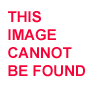
<style>
.page{position:relative;width:100px;height:95px;background:#ffffff}
.page>*{position:absolute;margin:0}
.t1{font:15px "Arial-BoldMT";color:#f50437;text-transform:uppercase}
</style>
<div class="page">
<p class="t1" style="left:8px;top:11px;width:77px;height:66px">This <br>Image <br>CanNOt <br>be Found</p>
</div>
